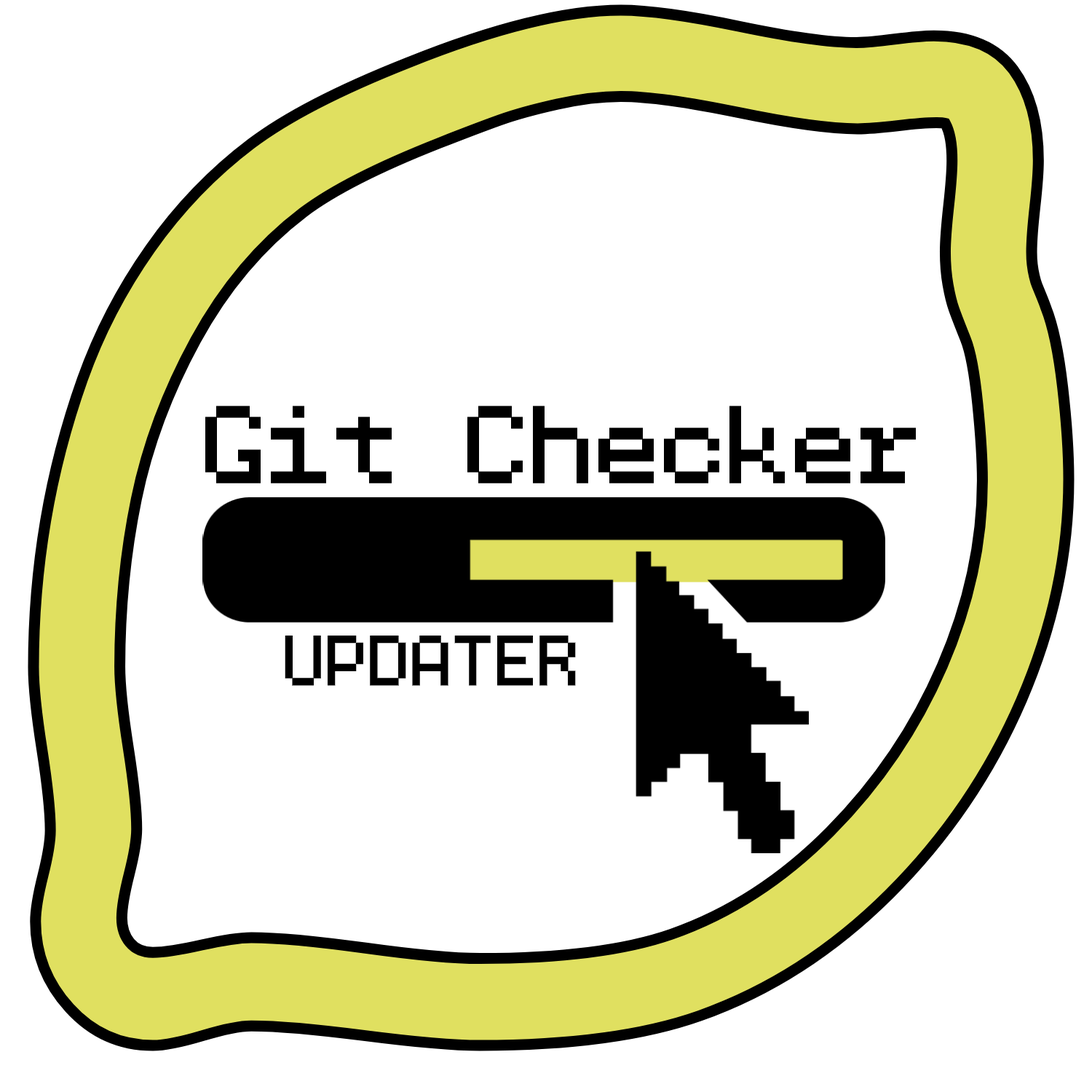
<style>
.page{position:relative;width:1092px;height:1092px;background:#ffffff}
.page>*{position:absolute;margin:0}
.t1{font:109.2px "BPdotsSquares-Bold";color:#000000}
.t2{font:70.7px "BPdotsSquares-Bold";color:#000000}
</style>
<div class="page">
<p class="t1" style="left:205px;top:405px;width:711px;height:78px">Git Checker</p>
<p class="t2" style="left:285px;top:636px;width:291px;height:50px">UPDATER</p>
</div>
